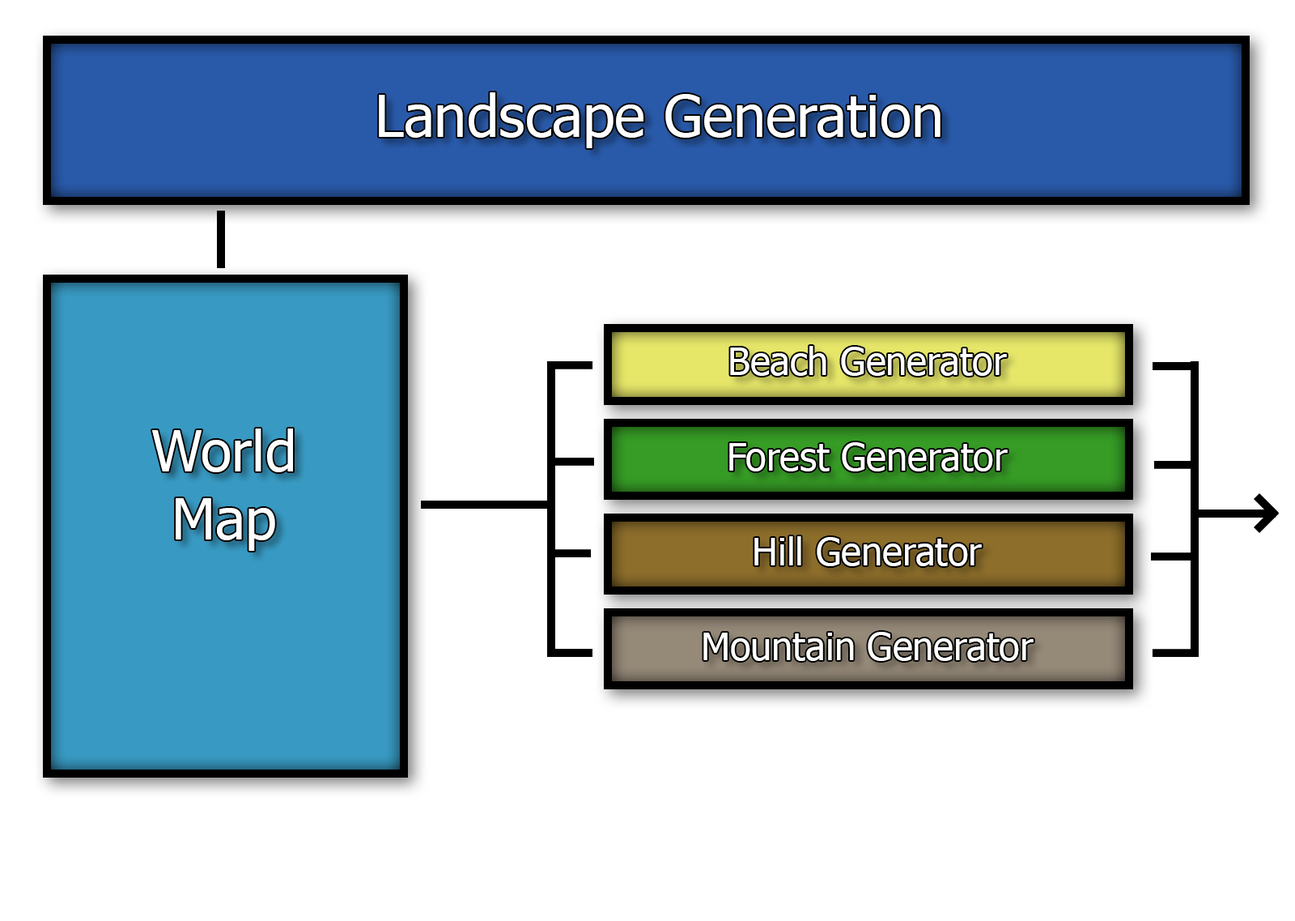
<style>
.page{position:relative;width:1295px;height:921px;background:#ffffff}
.page>*{position:absolute;margin:0}
.t1{font:58.3px "Tahoma";color:#ffffff}
.t2{font:38px "Tahoma";color:#ffffff}
.t3{font:56.9px "Tahoma";color:#ffffff}
</style>
<div class="page">
<p class="t1" style="left:379px;top:92px;width:562px;height:56px">Landscape Generation</p>
<p class="t2" style="left:730px;top:346px;width:277px;height:30px">Beach Generator</p>
<p class="t3" style="left:152px;top:428px;width:141px;height:123px;text-align:center">World<br>Map</p>
<p class="t2" style="left:729px;top:442px;width:279px;height:29px">Forest Generator</p>
<p class="t2" style="left:755px;top:536px;width:227px;height:30px">Hill Generator</p>
<p class="t2" style="left:704px;top:631px;width:330px;height:30px">Mountain Generator</p>
</div>
